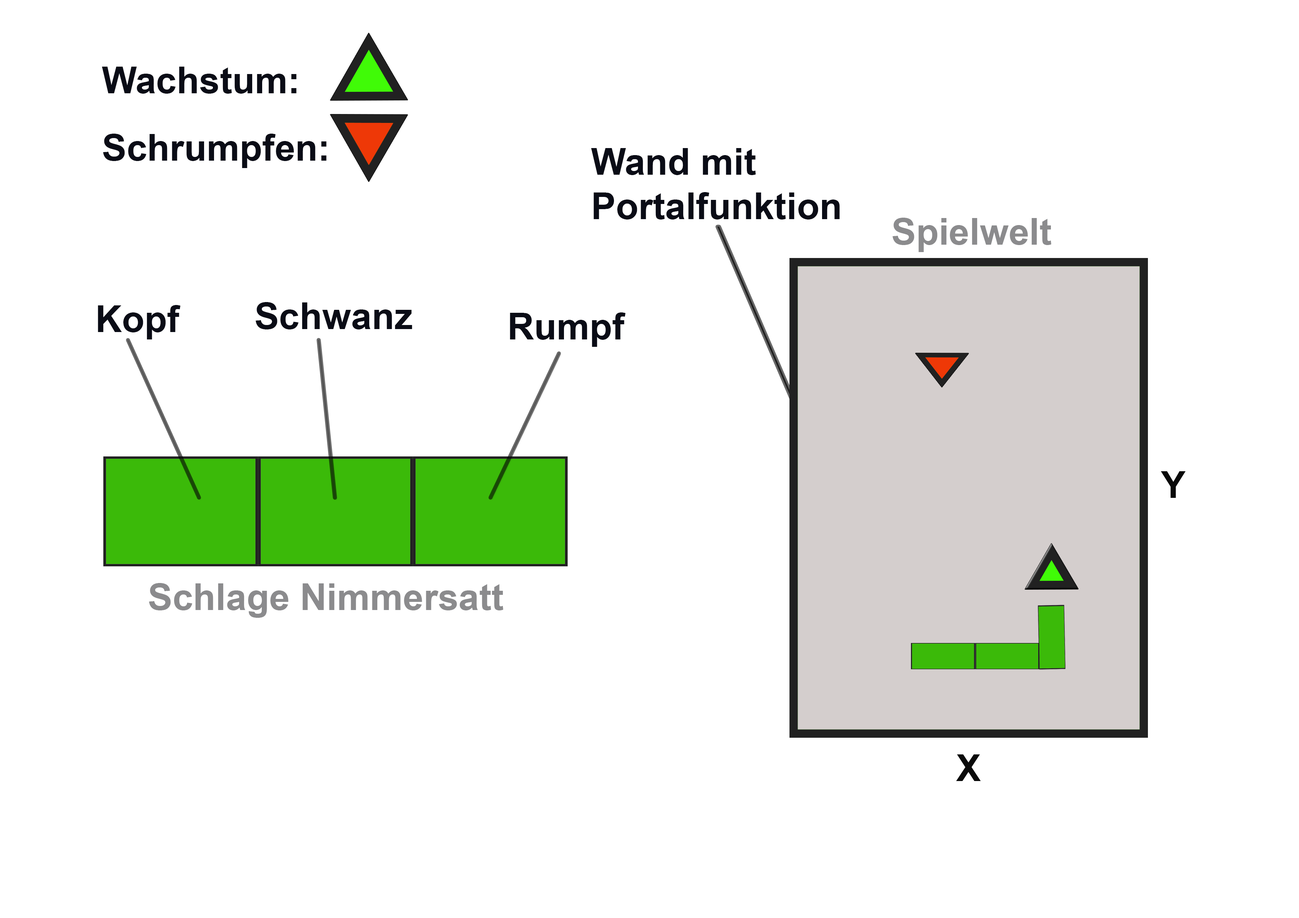
<style>
.page{position:relative;width:1299px;height:918px;background:#ffffff}
.page>*{position:absolute;margin:0}
.t1{font:37px "Arial-BoldMT";color:#0a0c16}
.t2{font:37px "Arial-BoldMT";color:#8b8b8d}
.t3{font:37px "Arial-BoldMT";color:#0a0a0a}
</style>
<div class="page">
<p class="t1" style="left:102px;top:67px;width:195px;height:27px">Wachstum:</p>
<p class="t1" style="left:103px;top:134px;width:224px;height:34px">Schrumpfen:</p>
<p class="t1" style="left:591px;top:148px;width:249px;height:72px">Wand mit <br>Portalfunktion</p>
<p class="t2" style="left:892px;top:218px;width:159px;height:34px">Spielwelt</p>
<p class="t1" style="left:98px;top:305px;width:83px;height:34px">Kopf</p>
<p class="t1" style="left:255px;top:302px;width:157px;height:27px">Schwanz</p>
<p class="t1" style="left:510px;top:312px;width:116px;height:35px">Rumpf</p>
<p class="t3" style="left:1161px;top:471px;width:24px;height:27px">Y</p>
<p class="t2" style="left:149px;top:583px;width:354px;height:35px">Schlage Nimmersatt</p>
<p class="t3" style="left:956px;top:755px;width:25px;height:26px">X</p>
</div>
